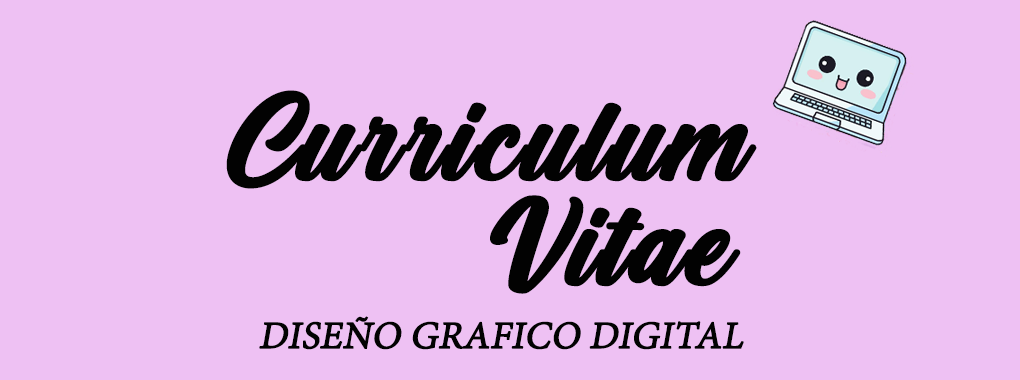
<style>
.page{position:relative;width:1020px;height:380px;background:#eec1f3}
.page>*{position:absolute;margin:0}
.t1{font:150px "CreamCake";color:#020202;font-weight:bold;font-style:italic}
.t2{font:41.7px "AdobeDevanagari-Regular";color:#020202;font-weight:bold;font-style:italic}
</style>
<div class="page">
<p class="t1" style="left:226px;top:90px;width:531px;height:99px">Curriculum</p>
<p class="t1" style="left:490px;top:195px;width:251px;height:99px">Vitae</p>
<p class="t2" style="left:259px;top:316px;width:485px;height:34px">DISEÑO GRAFICO DIGITAL</p>
</div>
